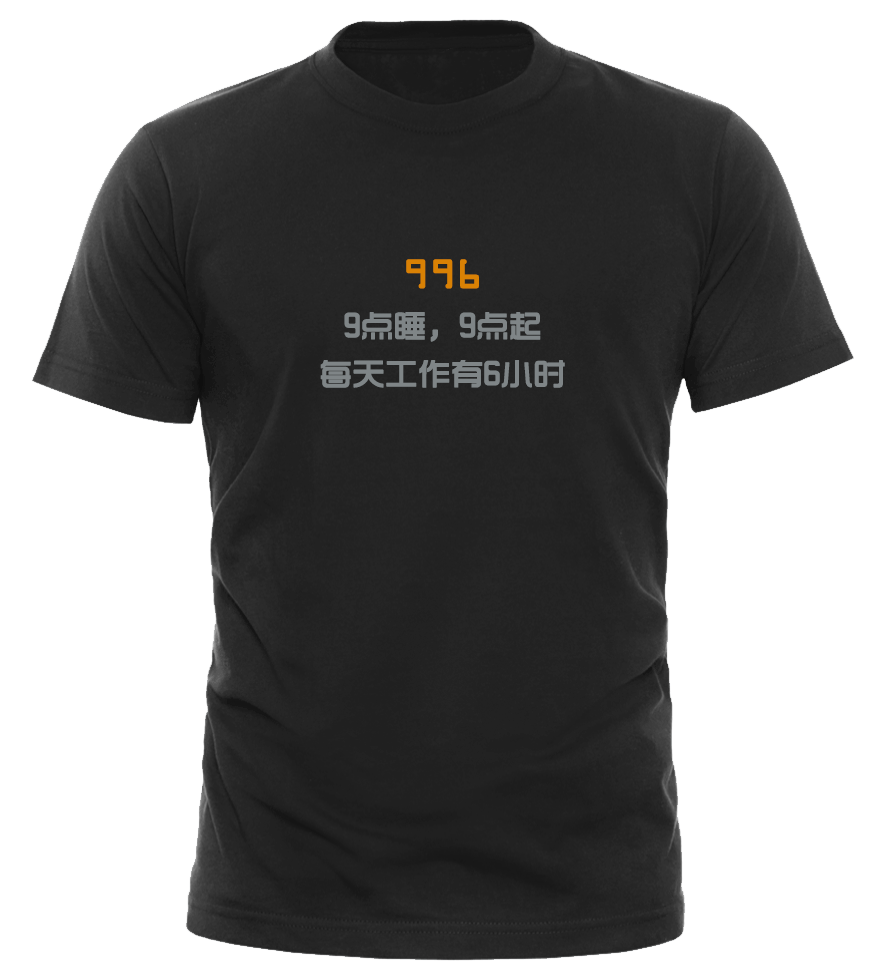
<style>
.page{position:relative;width:886px;height:980px;background:#ffffff}
.page>*{position:absolute;margin:0}
.t1{font:32px/48px "TRENDS";color:#7f8587;font-weight:bold}
.t2{font:36px/48px "OCRAStd";color:#d98104;font-weight:bold}
</style>
<div class="page">
<p class="t1" style="left:320px;top:259px;width:245px;height:129px;text-align:center"><span class="t2">996<br></span>9点睡，9点起<br>每天工作有6小时</p>
</div>
